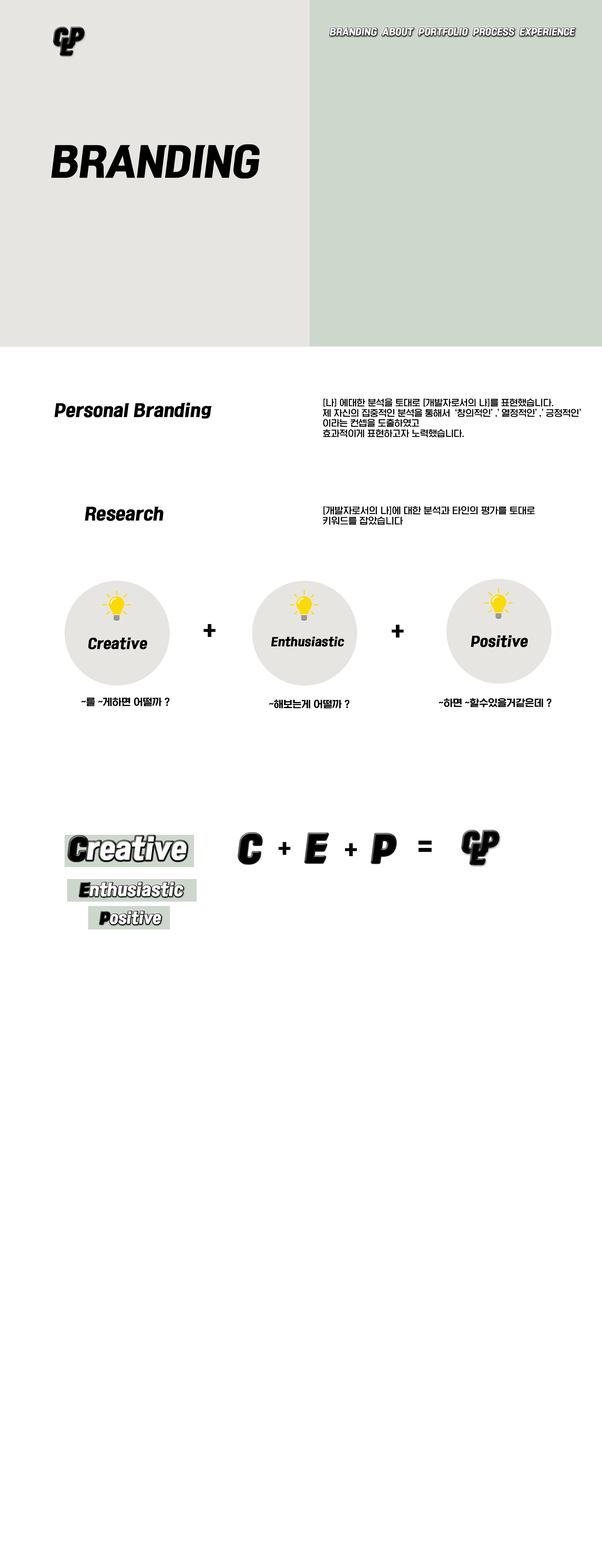
<style>
.page{position:relative;width:602px;height:1568px;background:#ffffff}
.page>*{position:absolute;margin:0}
.t1{font:8.7px "KoreanRKT-R";color:#ffffff}
.t2{font:38.6px "KoreanRKT-R";color:#000000}
.t3{font:8.5px "KoreanSWGI2-R";color:#000000}
.t4{font:16.3px "KoreanRKT-R";color:#000000}
.t5{font:8.8px "KoreanSWGI2-R";color:#000000}
.t6{font:28.2px "KoreanSWGI2-R";color:#000000}
.t7{font:13.2px "KoreanRKT-R";color:#000000}
.t8{font:11px "KoreanRKT-R";color:#000000}
.t9{font:9.4px "KoreanSWGI3-R";color:#000000}
.t10{font:32.9px "KoreanRKT-R";color:#000000}
.t11{font:26.3px "KoreanRKT-R";color:#fbfbfb}
.t12{font:26.3px "KoreanRKT-R";color:#000000}
.t13{font:32.9px "KoreanSWGI3-R";color:#000000}
.t14{font:15.6px "KoreanRKT-R";color:#fbfbfb}
.t15{font:15.6px "KoreanRKT-R";color:#000000}
.t16{font:14.1px "KoreanRKT-R";color:#fbfbfb}
.t17{font:14.1px "KoreanRKT-R";color:#000000}
</style>
<div class="page">
<p class="t1" style="left:330px;top:28px;width:245px;height:8px">BRANDING  ABOUT  PORTFOLIO  PROCESS  EXPERIENCE</p>
<p class="t2" style="left:51px;top:144px;width:209px;height:35px">BRANDING</p>
<p class="t3" style="left:323px;top:398px;width:258px;height:39px">[나] 에대한 분석을 토대로 [개발자로서의 나]를 표현했습니다. <br>제 자신의 집중적인 분석을 통해서 ‘창의적인’,’열정적인’,’긍정적인’<br>이라는 컨셉을 도출하였고<br>효과적이게 표현하고자 노력했습니다.</p>
<p class="t4" style="left:54px;top:403px;width:158px;height:16px">Personal Branding</p>
<p class="t4" style="left:85px;top:506px;width:78px;height:15px">Research</p>
<p class="t5" style="left:323px;top:506px;width:212px;height:19px">[개발자로서의 나]에 대한 분석과 타인의 평가를 토대로 키워드를 잡았습니다</p>
<p class="t6" style="left:204px;top:624px;width:12px;height:13px">+</p>
<p class="t6" style="left:392px;top:625px;width:12px;height:13px">+</p>
<p class="t7" style="left:88px;top:637px;width:59px;height:12px">Creative</p>
<p class="t8" style="left:271px;top:637px;width:73px;height:10px">Enthusiastic</p>
<p class="t7" style="left:471px;top:635px;width:57px;height:12px">Positive</p>
<p class="t9" style="left:81px;top:697px;width:89px;height:9px">~를 ~게하면 어떨까 ?</p>
<p class="t9" style="left:269px;top:699px;width:81px;height:9px">~해보는게 어떨까 ?</p>
<p class="t9" style="left:439px;top:698px;width:113px;height:9px">~하면 ~할수있을거같은데 ?</p>
<p class="t10" style="left:239px;top:834px;width:22px;height:29px">C</p>
<p class="t10" style="left:306px;top:834px;width:22px;height:28px">E</p>
<p class="t11" style="left:69px;top:836px;width:118px;height:25px"><span class="t12">C</span>reative</p>
<p class="t6" style="left:278px;top:842px;width:13px;height:13px">+</p>
<p class="t6" style="left:345px;top:843px;width:12px;height:13px">+</p>
<p class="t10" style="left:372px;top:834px;width:23px;height:28px">P</p>
<p class="t13" style="left:418px;top:840px;width:14px;height:12px">=</p>
<p class="t14" style="left:79px;top:882px;width:104px;height:15px"><span class="t15">E</span>nthusiastic</p>
<p class="t16" style="left:100px;top:911px;width:61px;height:13px"><span class="t17">P</span>ositive</p>
</div>
